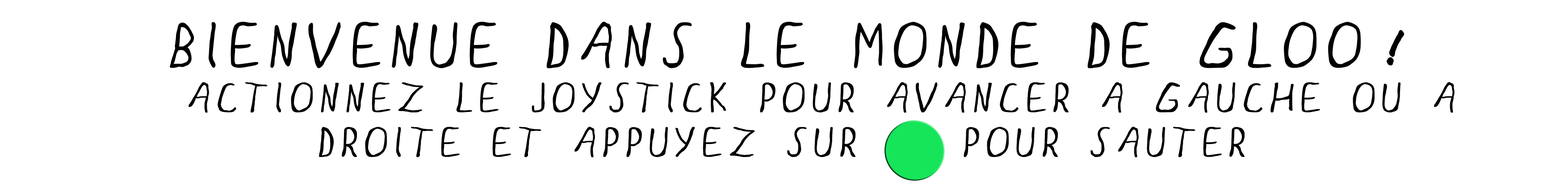
<style>
.page{position:relative;width:1568px;height:186px;background:#ffffff}
.page>*{position:absolute;margin:0}
.t1{font:37.2px "GLOO";letter-spacing:0.01em;color:#000000;font-weight:bold}
.t2{font:55.8px "GLOO";letter-spacing:0.01em;color:#000000;font-weight:bold}
.t3{font:55.8px "RageItalic";letter-spacing:0.01em;color:#000000;font-weight:bold}
</style>
<div class="page">
<p class="t1" style="left:170px;top:21px;width:1285px;height:137px;text-align:center"><span class="t2">BIENVENUE DANS LE MONDE DE GLOO </span><span class="t3">!<br></span> ACTIONNEZ LE JOYSTICK POUR AVANCER A GAUCHE OU A DROITE ET APPUYEZ SUR    POUR SAUTER</p>
</div>
